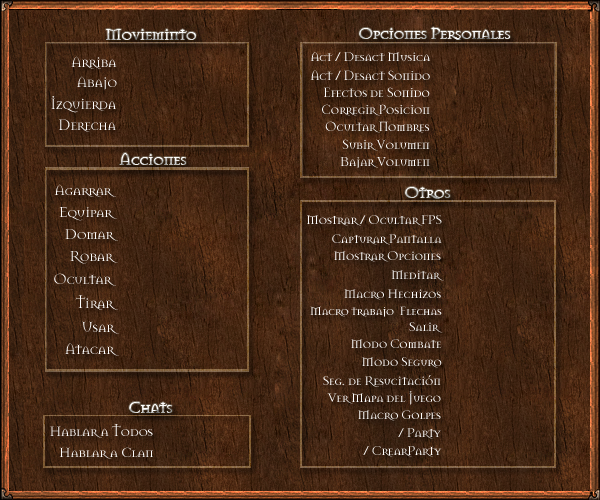
<style>
.page{position:relative;width:600px;height:500px}
.page>*{position:absolute;margin:0}
.t1{font:18.2px "Mason-Regular";letter-spacing:-0.06em}
.t2{font:18.3px "Mason-Regular";letter-spacing:-0.06em;scale:0.97 1}
.t3{font:13.7px "Mason-Regular";letter-spacing:-0.06em;color:#ffffff}
.t4{font:15.9px "Mason-Regular";letter-spacing:-0.06em;color:#ffffff}
.t5{font:14.6px "Mason-Regular";letter-spacing:-0.06em;color:#ffffff;scale:0.96 1}
.t6{font:14.4px "Mason-Regular";letter-spacing:-0.06em;color:#ffffff}
.t7{font:16.4px "Mason-Regular";letter-spacing:-0.06em;color:#ffffff}
.t8{font:15.6px "Mason-Regular";letter-spacing:-0.06em;color:#ffffff}
.t9{font:15.6px "Mason-Regular";letter-spacing:-0.06em;color:#ffffff;scale:1.03 1}
.t10{font:14px "Mason-Regular";letter-spacing:-0.06em;color:#ffffff}
.t11{font:15.8px "Mason-Regular";letter-spacing:-0.06em;color:#ffffff}
.t12{font:13.8px "Mason-Regular";letter-spacing:-0.06em;color:#ffffff}
.t13{font:16px "Mason-Regular";letter-spacing:-0.06em;color:#ffffff}
.t14{font:13px "Mason-Regular";letter-spacing:-0.06em;color:#ffffff}
.t15{font:16.1px "Mason-Regular";letter-spacing:-0.06em;color:#ffffff}
.t16{font:18.2px "Mason-Regular";letter-spacing:-0.06em;scale:0.96 1}
.t17{font:15px "Mason-Regular";letter-spacing:-0.06em;color:#ffffff}
.t18{font:14px "Mason-Regular";letter-spacing:-0.06em}
.t19{font:14.6px "Mason-Regular";letter-spacing:-0.06em;color:#ffffff;scale:1.05 1}
</style>
<div class="page">
<p class="t1" style="left:106px;top:29px;width:91px;height:11px">Movieminto</p>
<p class="t2" style="left:359px;top:27px;width:152px;height:13px">Opciones Personales</p>
<p class="t3" style="left:310px;top:52px;width:120px;height:10px">Act / Desact Musica</p>
<p class="t4" style="left:71px;top:56px;width:46px;height:13px">Arriba</p>
<p class="t4" style="left:77px;top:76px;width:40px;height:14px">Abajo</p>
<p class="t5" style="left:310px;top:70px;width:120px;height:10px">Act / Desact Sonido</p>
<p class="t6" style="left:324px;top:87px;width:106px;height:10px">Efectos de Sonido</p>
<p class="t7" style="left:51px;top:96px;width:65px;height:17px">Izquierda</p>
<p class="t6" style="left:322px;top:104px;width:108px;height:12px">Corregir Posicion</p>
<p class="t7" style="left:59px;top:119px;width:57px;height:13px">Derecha</p>
<p class="t6" style="left:325px;top:121px;width:104px;height:12px">Ocultar Nombres</p>
<p class="t6" style="left:342px;top:139px;width:88px;height:12px">Subir Volumen</p>
<p class="t2" style="left:119px;top:153px;width:68px;height:12px">Acciones</p>
<p class="t6" style="left:340px;top:157px;width:90px;height:11px">Bajar Volumen</p>
<p class="t8" style="left:54px;top:184px;width:62px;height:13px">Agarrar</p>
<p class="t2" style="left:405px;top:187px;width:46px;height:12px">Otros</p>
<p class="t9" style="left:59px;top:207px;width:58px;height:14px">Equipar</p>
<p class="t10" style="left:307px;top:215px;width:135px;height:11px">Mostrar / Ocultar FPS</p>
<p class="t11" style="left:65px;top:229px;width:53px;height:12px">Domar</p>
<p class="t3" style="left:332px;top:234px;width:110px;height:11px">Capturar Pantalla</p>
<p class="t4" style="left:70px;top:251px;width:48px;height:13px">Robar</p>
<p class="t12" style="left:334px;top:251px;width:107px;height:11px">Mostrar Opciones</p>
<p class="t3" style="left:391px;top:270px;width:53px;height:11px">Meditar</p>
<p class="t4" style="left:54px;top:273px;width:62px;height:13px">Ocultar</p>
<p class="t3" style="left:344px;top:289px;width:97px;height:11px">Macro Hechizos</p>
<p class="t13" style="left:75px;top:295px;width:43px;height:15px">Tirar</p>
<p class="t14" style="left:310px;top:306px;width:132px;height:11px">Macro trabajo  Flechas</p>
<p class="t15" style="left:82px;top:321px;width:37px;height:13px">Usar</p>
<p class="t3" style="left:409px;top:322px;width:34px;height:11px">Salir</p>
<p class="t3" style="left:351px;top:339px;width:91px;height:9px">Modo Combate</p>
<p class="t13" style="left:65px;top:343px;width:54px;height:13px">Atacar</p>
<p class="t3" style="left:362px;top:357px;width:80px;height:11px">Modo Seguro</p>
<p class="t3" style="left:323px;top:375px;width:118px;height:12px">Seg. de Resucitación</p>
<p class="t3" style="left:327px;top:391px;width:114px;height:14px">Ver Mapa del Juego</p>
<p class="t16" style="left:129px;top:402px;width:44px;height:11px">Chats</p>
<p class="t3" style="left:358px;top:410px;width:83px;height:11px">Macro Golpes</p>
<p class="t17" style="left:50px;top:424px;width:103px;height:14px">Hablar a Todos</p>
<p class="t18" style="left:398px;top:428px;width:43px;height:11px">/ Party</p>
<p class="t19" style="left:59px;top:447px;width:94px;height:12px">Hablar a Clan</p>
<p class="t10" style="left:363px;top:446px;width:79px;height:11px">/ CrearParty</p>
</div>
